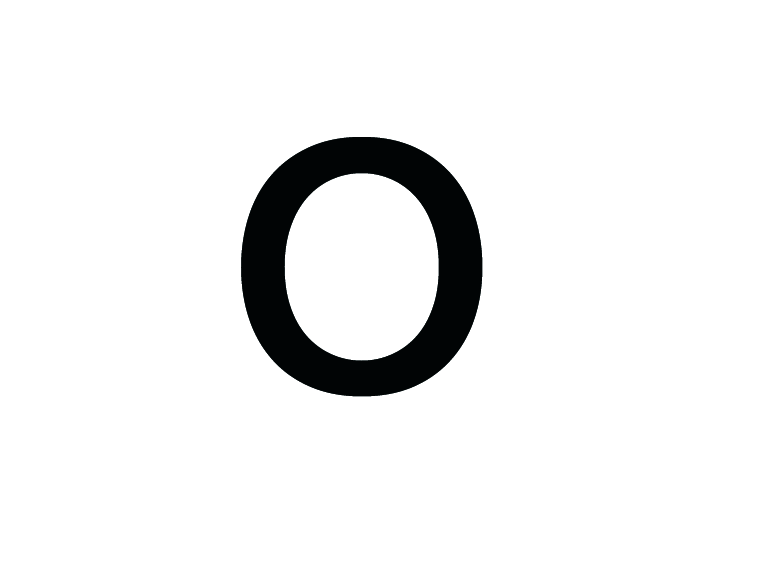
<style>
.page{position:relative;width:768px;height:576px;background:#ffffff}
.page>*{position:absolute;margin:0}
.t1{font:480px "HelveticaNeue";color:#010405}
</style>
<div class="page">
<p class="t1" style="left:241px;top:137px;width:242px;height:260px">o</p>
</div>
